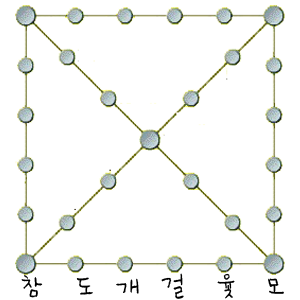
<style>
.page{position:relative;width:300px;height:300px;background:#ffffff}
.page>*{position:absolute;margin:0}
.t1{font:30px "Pencil_GilGo(No.1)";color:#000000}
</style>
<div class="page">
<p class="t1" style="left:21px;top:273px;width:263px;height:26px">참   도  개  걸   윷   모</p>
</div>
